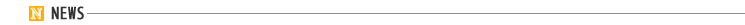
<style>
.page{position:relative;width:745px;height:25px;background:#ffffff}
.page>*{position:absolute;margin:0}
.t1{font:16px "AdobeFanHeitiStd-Bold";color:#343434;font-weight:bold}
</style>
<div class="page">
<p class="t1" style="left:51px;top:6px;width:33px;height:14px">NEWS</p>
</div>
